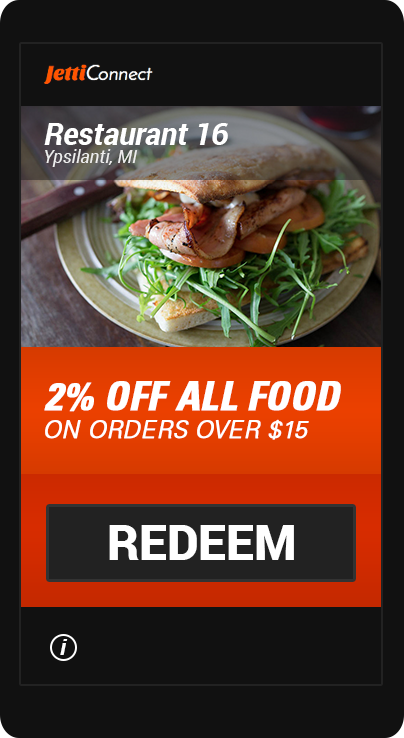
<style>
.page{position:relative;width:404px;height:738px;background:#111111}
.page>*{position:absolute;margin:0}
.t1{font:31.1px "Roboto-BoldItalic";color:#ffffff}
.t2{font:17.8px "Roboto-Italic";color:#eeeeee}
.t3{font:38.8px "Univers-CondensedBoldOblique";color:#ffffff;text-transform:uppercase;font-weight:bold}
.t4{font:23.8px "Univers-LightOblique";color:#ffffff;text-transform:uppercase;font-weight:bold}
.t5{font:48.8px "Roboto-Black";color:#ffffff}
.t6{font:23.1px "Roboto-BoldItalic";color:#ffffff}
</style>
<div class="page">
<p class="t1" style="left:44px;top:123px;width:184px;height:22px">Restaurant 16</p>
<p class="t2" style="left:45px;top:149px;width:93px;height:18px">Ypsilanti, MI</p>
<p class="t3" style="left:44px;top:381px;width:297px;height:31px">2% Off All Food</p>
<p class="t4" style="left:45px;top:419px;width:264px;height:21px">on orders over $15</p>
<p class="t5" style="left:109px;top:525px;width:185px;height:35px">REDEEM</p>
<p class="t6" style="left:60px;top:639px;width:8px;height:16px">i</p>
</div>
